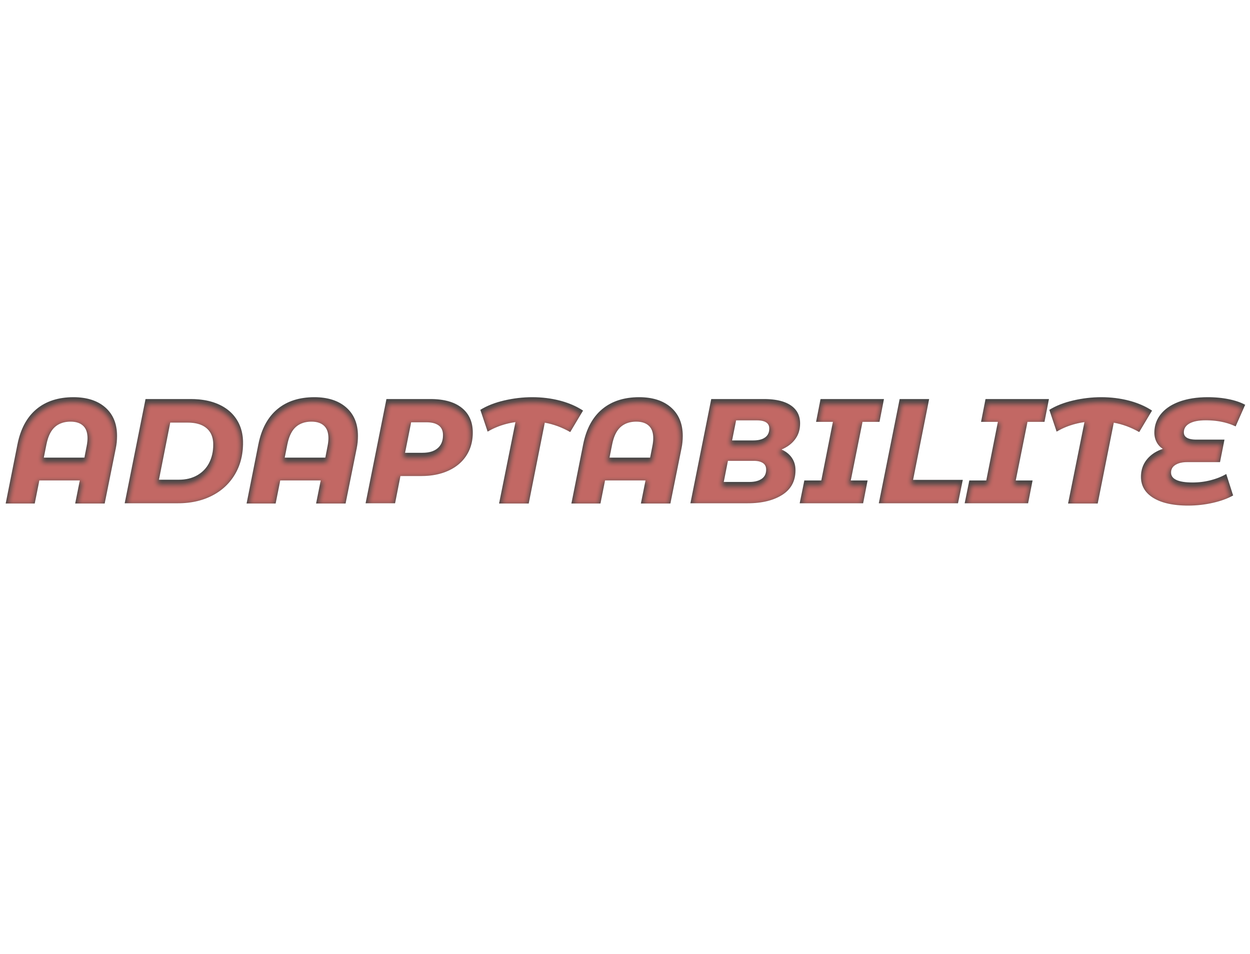
<style>
.page{position:relative;width:1250px;height:954px;background:#ffffff}
.page>*{position:absolute;margin:0}
.t1{font:148.8px "MontserratAlternates-ExtraBoldItalic"}
</style>
<div class="page">
<p class="t1" style="left:6px;top:397px;width:1239px;height:109px">ADAPTABILITE</p>
</div>
